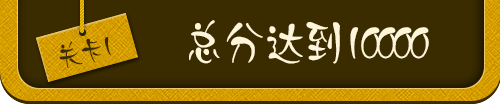
<style>
.page{position:relative;width:500px;height:104px;background:#3b2c00}
.page>*{position:absolute;margin:0}
.t1{font:48px "JDaiYu";letter-spacing:-0.16em;color:#fff6da}
.t2{font:28px "JDaiYu";letter-spacing:-0.16em;color:#3a2b00}
</style>
<div class="page">
<p class="t1" style="left:189px;top:20px;width:240px;height:44px">总分达到10000</p>
<p class="t2" style="left:59px;top:37px;width:52px;height:32px;rotate:-14deg">关卡1</p>
</div>
